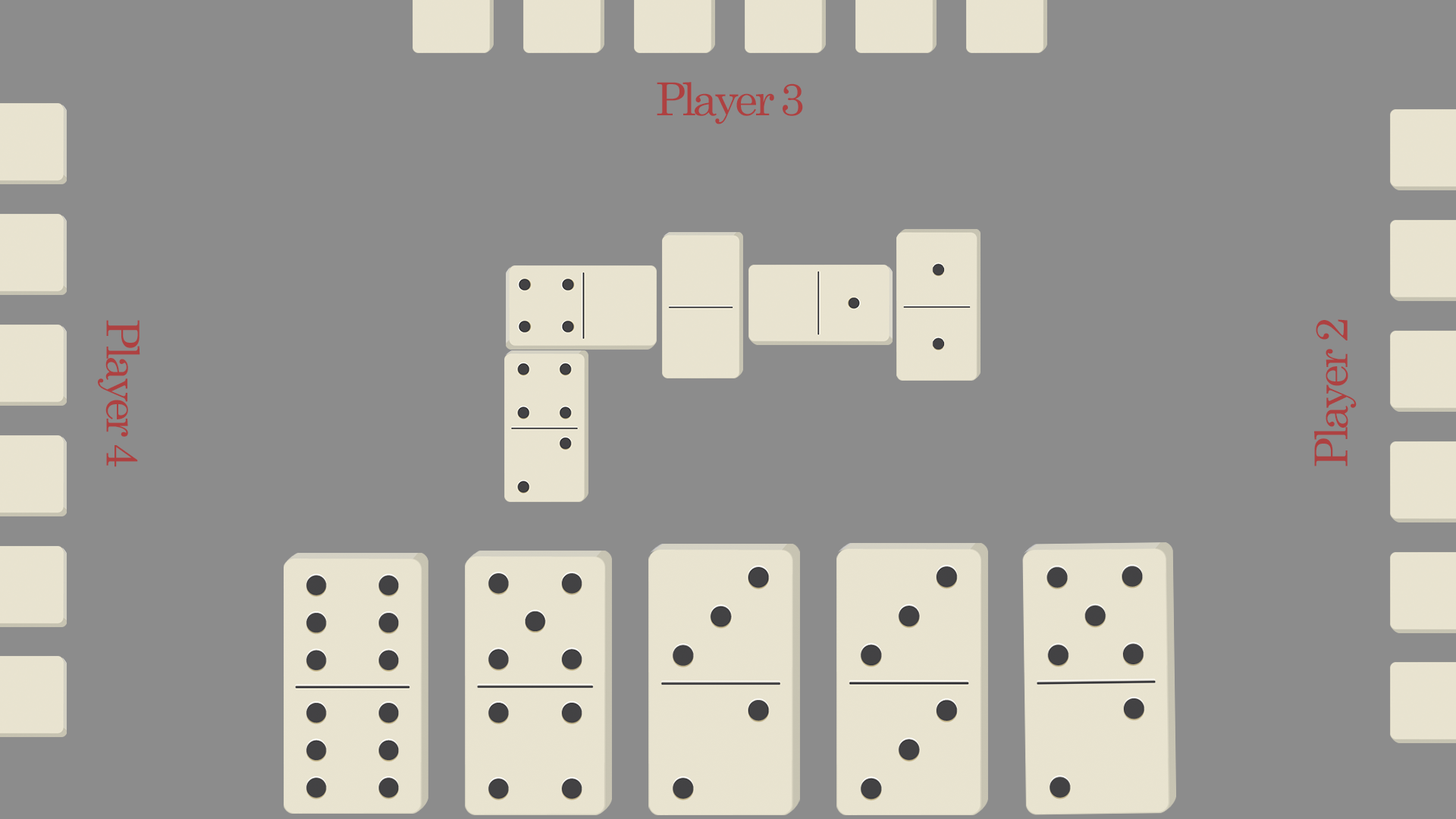
<style>
.page{position:relative;width:1456px;height:819px;background:#8c8c8c}
.page>*{position:absolute;margin:0}
.t1{font:45.5px "Century";letter-spacing:-0.08em;color:#ae4141}
</style>
<div class="page">
<p class="t1" style="left:657px;top:82px;width:146px;height:42px">Player 3</p>
<p class="t1" style="left:98px;top:320px;width:42px;height:147px;rotate:90deg">Player 4</p>
<p class="t1" style="left:1314px;top:319px;width:43px;height:147px;rotate:-90deg">Player 2</p>
</div>
